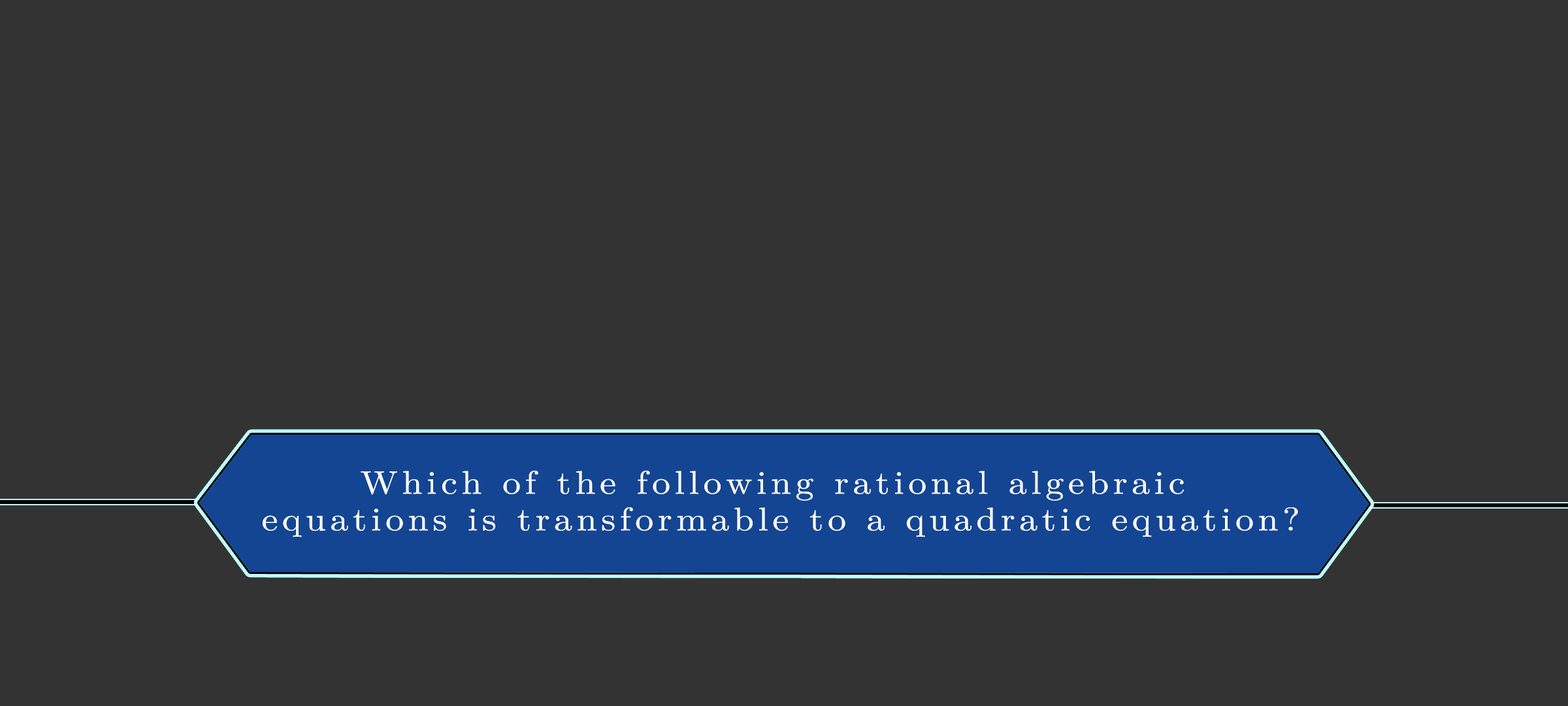
<style>
.page{position:relative;width:1568px;height:706px;background:#333333}
.page>*{position:absolute;margin:0}
.t1{font:32.7px/36.6px "LatinModernMath-Regular";letter-spacing:0.115em;color:#ffffff;scale:1.12 1}
</style>
<div class="page">
<p class="t1" style="left:263px;top:470px;width:1035px;height:67px;text-align:center">Which of the following rational algebraic <br>equations is transformable to a quadratic equation?</p>
</div>
